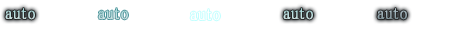
<style>
.page{position:relative;width:465px;height:29px;background:#ffffff}
.page>*{position:absolute;margin:0}
.t1{font:18.1px "MS-PMincho";letter-spacing:0.03em;color:#bde0e1;font-weight:bold;scale:0.84 1}
.t2{font:18.1px "MS-PMincho";letter-spacing:0.03em;color:#ffffff;font-weight:bold;scale:0.84 1}
.t3{font:18.1px "MS-PMincho";letter-spacing:0.03em;color:#99acb3;font-weight:bold;scale:0.84 1}
</style>
<div class="page">
<p class="t1" style="left:5px;top:8px;width:30px;height:12px">auto</p>
<p class="t2" style="left:190px;top:9px;width:30px;height:12px">auto</p>
<p class="t1" style="left:283px;top:8px;width:30px;height:12px">auto</p>
<p class="t3" style="left:377px;top:8px;width:30px;height:12px">auto</p>
</div>
